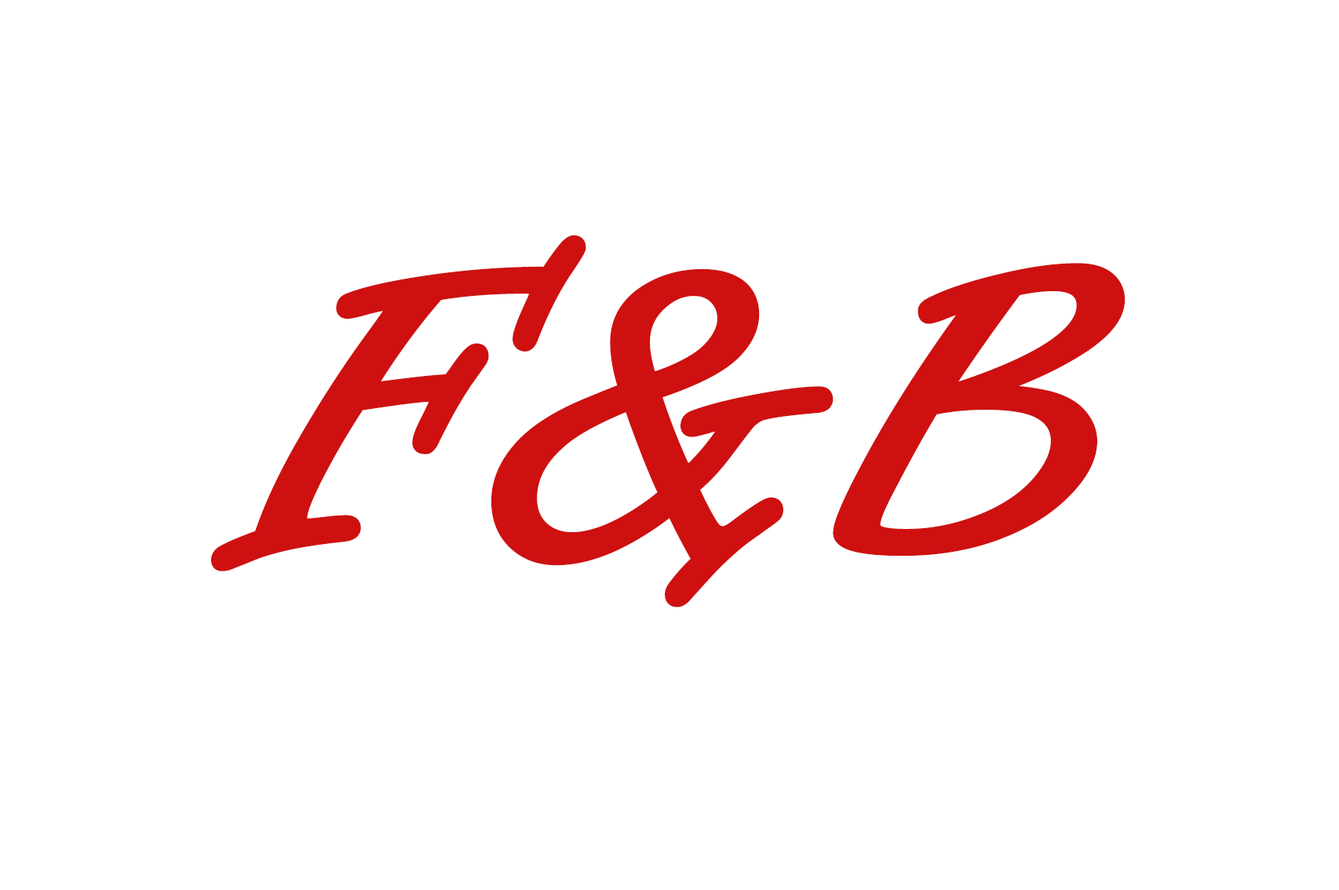
<style>
.page{position:relative;width:1339px;height:890px;background:#ffffff}
.page>*{position:absolute;margin:0}
.t1{font:471.1px "InformalRoman-Regular";color:#ce1010;font-weight:bold}
</style>
<div class="page">
<p class="t1" style="left:211px;top:235px;width:915px;height:373px">F&amp;B</p>
</div>
